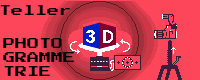
<style>
.page{position:relative;width:200px;height:80px;background:#fd4659}
.page>*{position:absolute;margin:0}
.t1{font:12px "PressStart2P-Regular";color:#000000}
</style>
<div class="page">
<p class="t1" style="left:0px;top:5px;width:70px;height:10px">Teller</p>
<p class="t1" style="left:3px;top:38px;width:71px;height:38px">PHOTO<br>GRAMME<br>TRIE</p>
</div>
